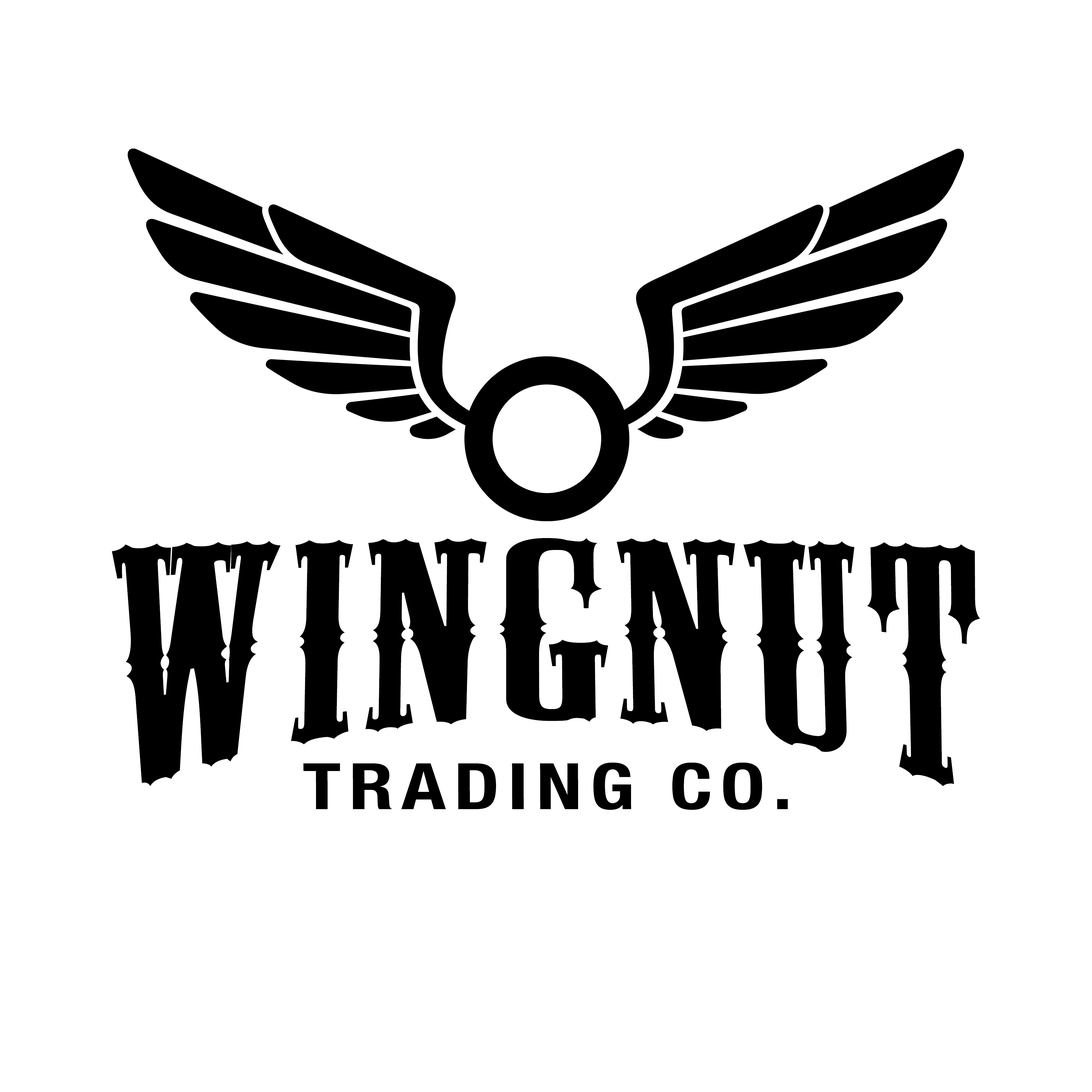
<style>
.page{position:relative;width:1092px;height:1092px;background:#ffffff}
.page>*{position:absolute;margin:0}
.t1{font:330.3px "MesquiteStd";letter-spacing:0.025em;color:#000000;scale:1.24 1}
.t2{font:63.9px "HelveticaNeue-CondensedBold";letter-spacing:0.1em;color:#000000;scale:1.25 1}
</style>
<div class="page">
<p class="t1" style="left:112px;top:538px;width:868px;height:248px">WINGNUT</p>
<p class="t2" style="left:303px;top:762px;width:485px;height:48px">TRADING CO.</p>
</div>
